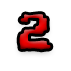
<style>
.page{position:relative;width:71px;height:71px;background:#ffffff}
.page>*{position:absolute;margin:0}
.t1{font:55px "Tipi-Organic"}
</style>
<div class="page">
<p class="t1" style="left:19px;top:14px;width:32px;height:36px">2</p>
</div>
